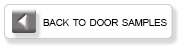
<style>
.page{position:relative;width:182px;height:48px;background:#ffffff}
.page>*{position:absolute;margin:0}
.t1{font:13.6px "ArialMT";color:#000000;font-variant:small-caps}
</style>
<div class="page">
<p class="t1" style="left:43px;top:19px;width:124px;height:7px">back to door samples</p>
</div>
